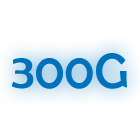
<style>
.page{position:relative;width:140px;height:140px;background:#ffffff}
.page>*{position:absolute;margin:0}
.t1{font:50px "BerlinSansFB-Reg";color:#0072bc}
</style>
<div class="page">
<p class="t1" style="left:11px;top:53px;width:116px;height:36px">300G</p>
</div>
